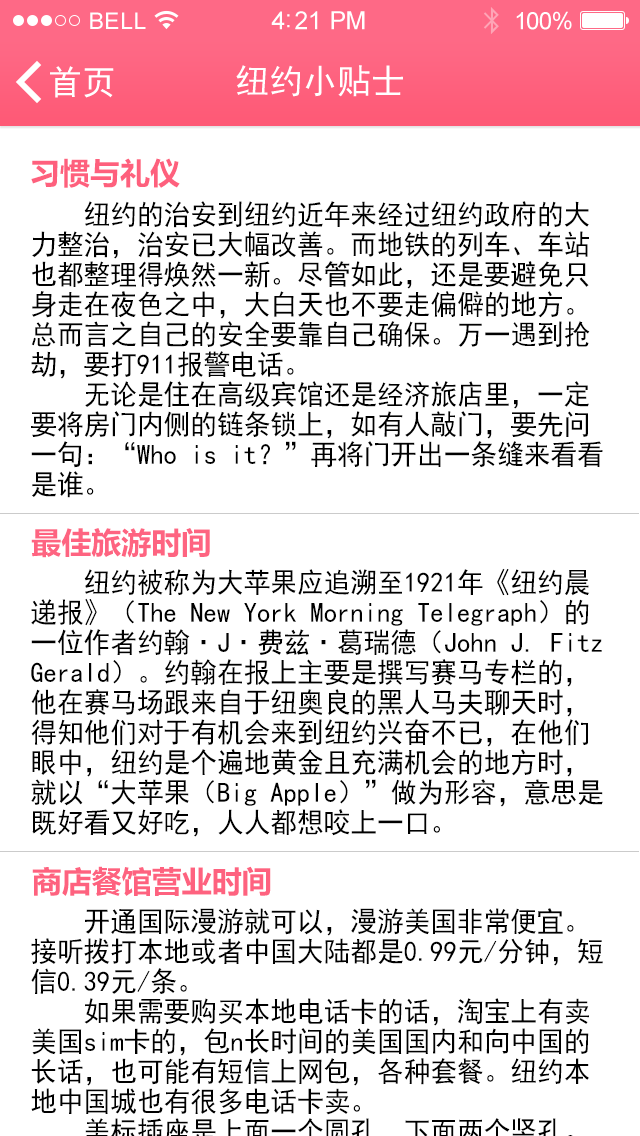
<style>
.page{position:relative;width:640px;height:1136px;background:#ffffff}
.page>*{position:absolute;margin:0}
.t1{font:30px "MicrosoftYaHei-Bold";color:#fe607d}
.t2{font:28px/30px "SimHei";color:#000000;scale:0.95 1}
.t3{font:30px "MicrosoftYaHei-Bold";color:#fe6481}
.t4{font:30px "MicrosoftYaHei-Bold";color:#fe627f}
</style>
<div class="page">
<p class="t1" style="left:31px;top:158px;width:149px;height:30px">习惯与礼仪</p>
<p class="t2" style="left:31px;top:201px;width:572px;height:297px">纽约的治安到纽约近年来经过纽约政府的大力整治，治安已大幅改善。而地铁的列车、车站也都整理得焕然一新。尽管如此，还是要避免只身走在夜色之中，大白天也不要走偏僻的地方。总而言之自己的安全要靠自己确保。万一遇到抢劫，要打911报警电话。<br>    无论是住在高级宾馆还是经济旅店里，一定要将房门内侧的链条锁上，如有人敲门，要先问一句：“Who is it？”再将门开出一条缝来看看是谁。</p>
<p class="t3" style="left:31px;top:528px;width:179px;height:30px">最佳旅游时间</p>
<p class="t2" style="left:31px;top:568px;width:572px;height:269px">纽约被称为大苹果应追溯至1921年《纽约晨递报》（The New York Morning Telegraph）的一位作者约翰·J·费兹·葛瑞德（John J. Fitz Gerald）。约翰在报上主要是撰写赛马专栏的，他在赛马场跟来自于纽奥良的黑人马夫聊天时，得知他们对于有机会来到纽约兴奋不已，在他们眼中，纽约是个遍地黄金且充满机会的地方时，就以“大苹果（Big Apple）”做为形容，意思是既好看又好吃，人人都想咬上一口。</p>
<p class="t4" style="left:32px;top:866px;width:239px;height:30px">商店餐馆营业时间</p>
</div>
